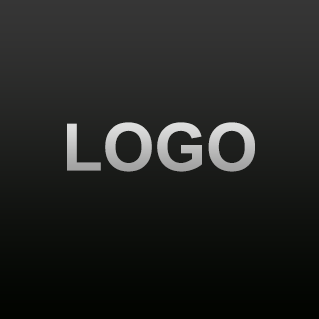
<style>
.page{position:relative;width:319px;height:319px}
.page>*{position:absolute;margin:0}
.t1{font:65.8px "Arial-BoldMT"}
</style>
<div class="page">
<p class="t1" style="left:67px;top:122px;width:188px;height:50px">LOGO</p>
</div>
